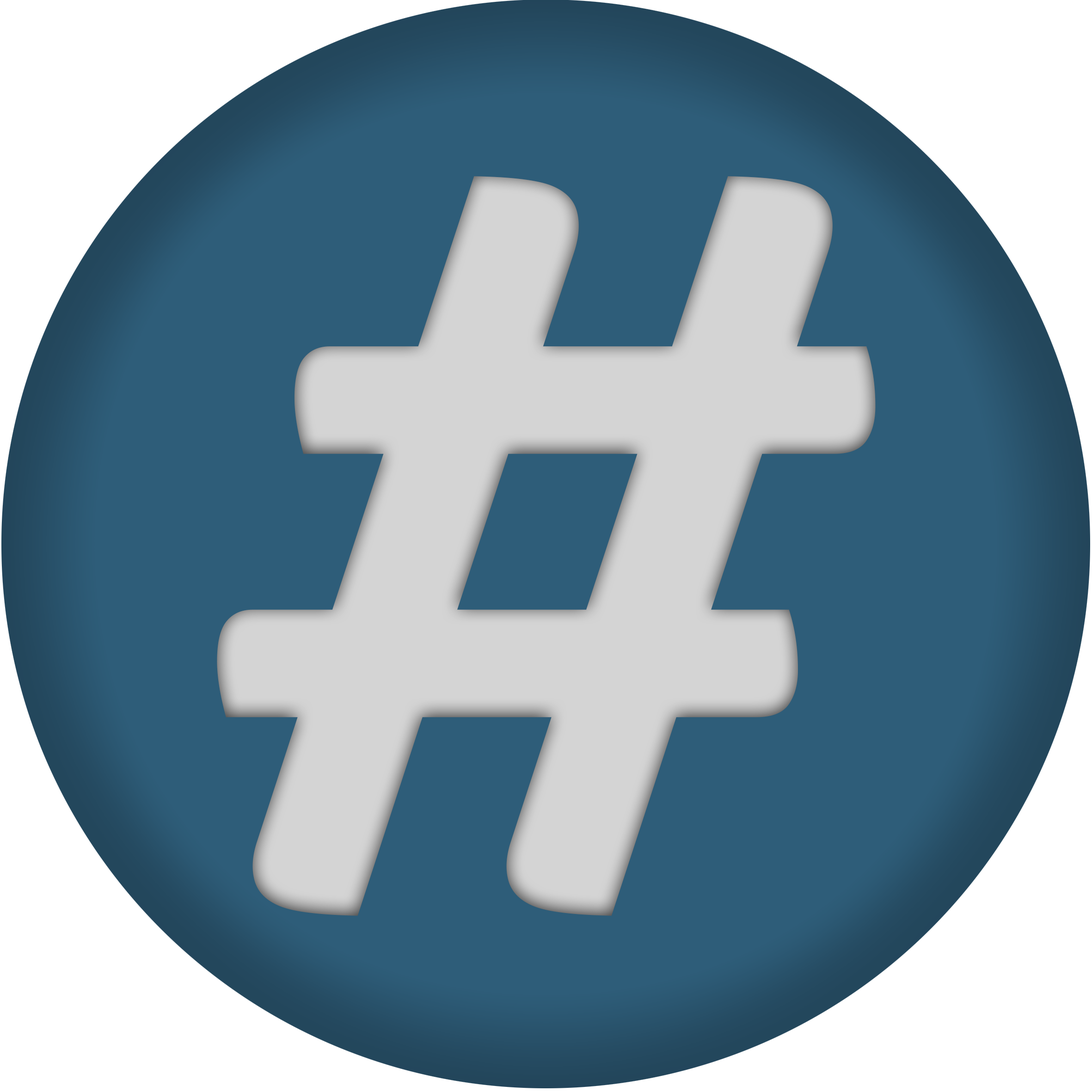
<style>
.page{position:relative;width:1092px;height:1092px;background:#2e5d79}
.page>*{position:absolute;margin:0}
.t1{font:1078.7px "Kefa-Bold";color:#d4d4d4}
</style>
<div class="page">
<p class="t1" style="left:217px;top:176px;width:659px;height:740px">#</p>
</div>
